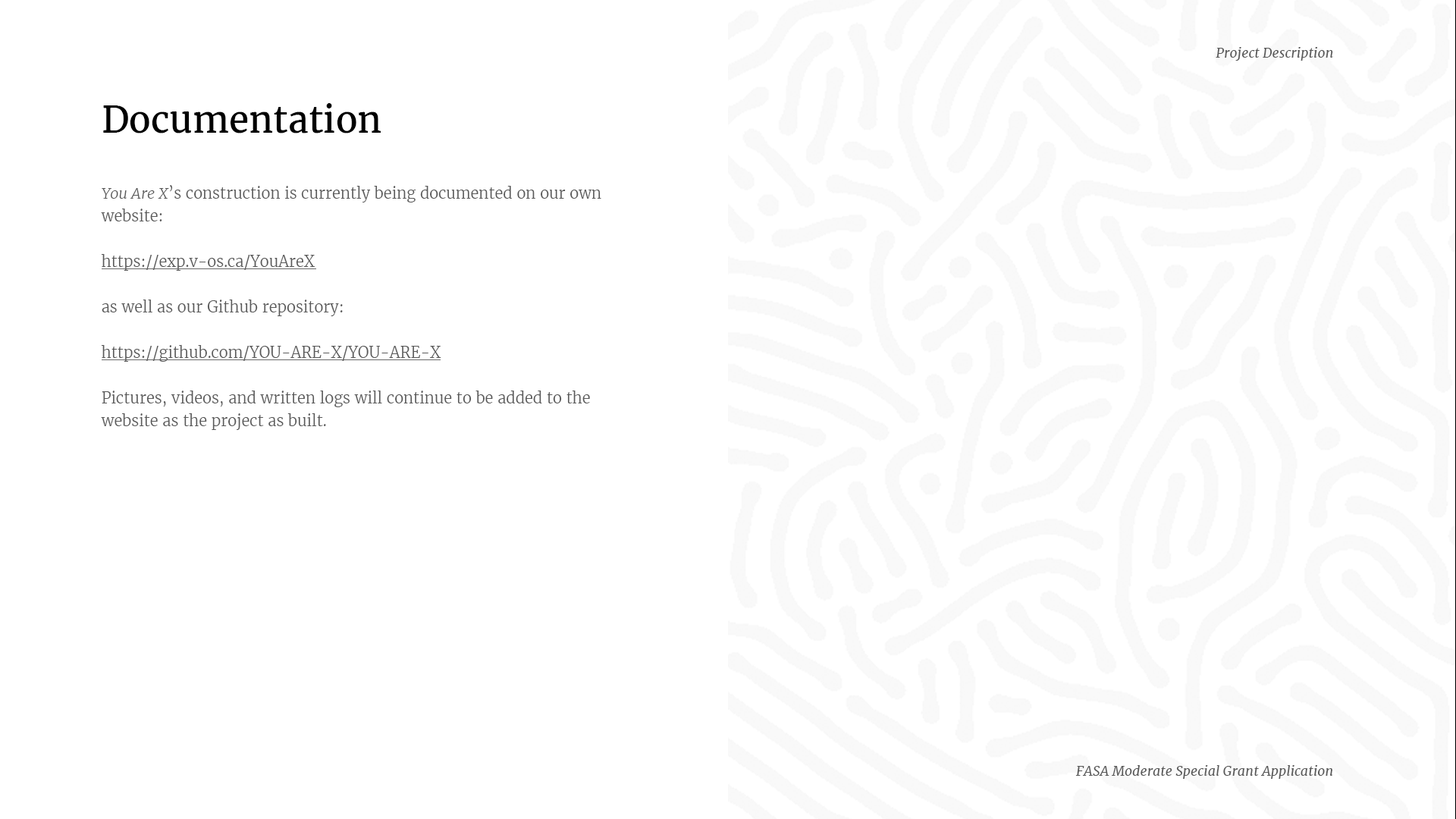
<style>
.page{position:relative;width:1456px;height:819px;background:#ffffff}
.page>*{position:absolute;margin:0}
.t1{font:13.6px "Merriweather-Italic";color:#595959}
.t2{font:36.4px "Merriweather-Regular";color:#000000}
.t3{font:15.2px/22.7px "Merriweather-Light";color:#595959}
.t4{font:15.2px/22.7px "Merriweather-LightItalic";color:#595959}
</style>
<div class="page">
<p class="t1" style="left:1216px;top:47px;width:117px;height:14px">Project Description</p>
<p class="t2" style="left:103px;top:103px;width:278px;height:30px">Documentation</p>
<p class="t3" style="left:101px;top:185px;width:500px;height:245px"><span class="t4">You Are X</span>’s construction is currently being documented on our own website:<br><br>https://exp.v-os.ca/YouAreX<br><br>as well as our Github repository:<br><br>https://github.com/YOU-ARE-X/YOU-ARE-X<br><br>Pictures, videos, and written logs will continue to be added to the website as the project as built.</p>
<p class="t1" style="left:1075px;top:765px;width:258px;height:14px">FASA Moderate Special Grant Application</p>
</div>
